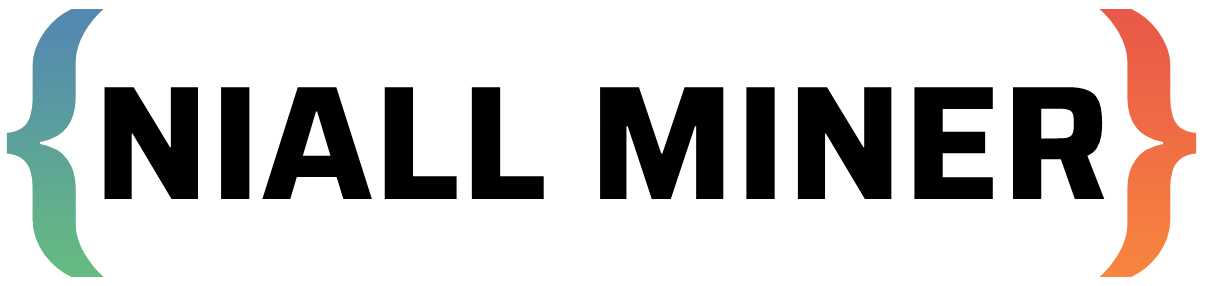
<style>
.page{position:relative;width:1205px;height:286px;background:#ffffff}
.page>*{position:absolute;margin:0}
.t1{font:162.5px "Saira-Bold";color:#000000}
</style>
<div class="page">
<p class="t1" style="left:104px;top:87px;width:1001px;height:112px">NIALL MINER</p>
</div>
